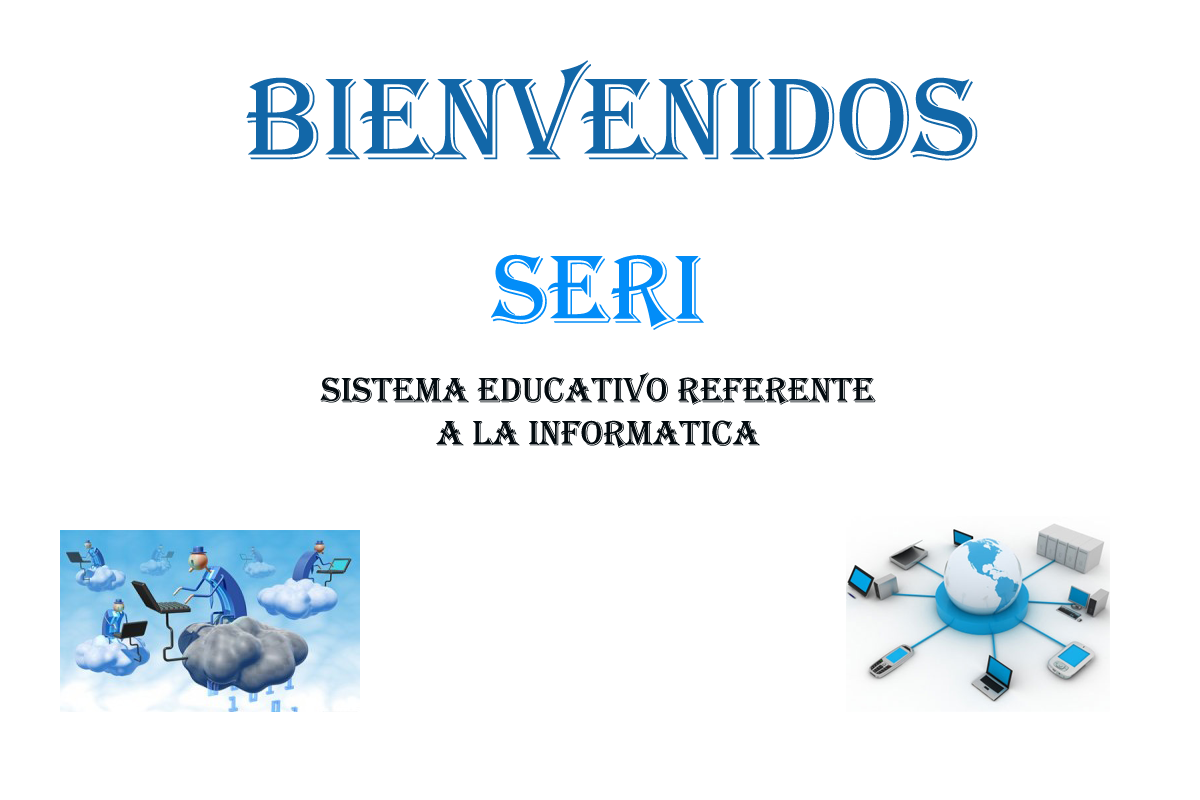
<style>
.page{position:relative;width:1200px;height:800px;background:#ffffff}
.page>*{position:absolute;margin:0}
.t1{font:120px "Algerian";color:#1267a8}
.t2{font:100px "Algerian";color:#028df8}
.t3{font:36px "Algerian";color:#020a0f}
</style>
<div class="page">
<p class="t1" style="left:246px;top:60px;width:732px;height:101px">Bienvenidos</p>
<p class="t2" style="left:491px;top:254px;width:213px;height:76px">SERI</p>
<p class="t3" style="left:320px;top:372px;width:556px;height:76px;text-align:center">Sistema Educativo Referente a la Informatica</p>
</div>
